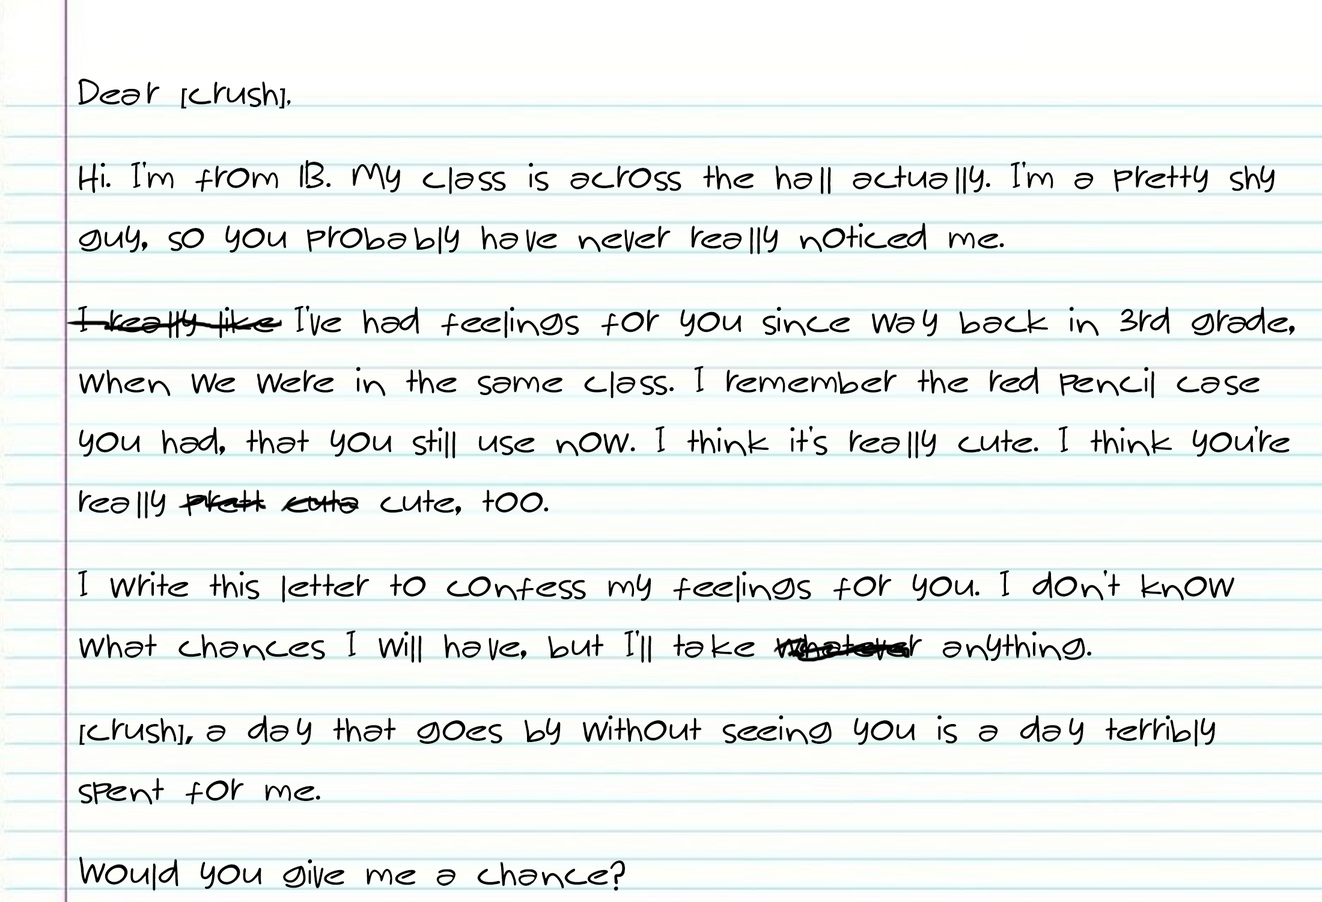
<style>
.page{position:relative;width:1322px;height:902px}
.page>*{position:absolute;margin:0}
.t1{font:22.5px/60.1px "Mak_Ngah_Punya";color:#000000}
.t2{font:22.5px/60.1px "ErasITC-Demi";color:#000000}
.t3{font:37.6px/60.1px "Mak_Ngah_Punya";color:#000000}
.t4{font:37.6px/60.1px "ErasITC-Demi";color:#000000}
</style>
<div class="page">
<p class="t1" style="left:78px;top:78px;width:1217px;height:812px">Dear <span class="t2">[</span>crush<span class="t2">]</span>,<br>Hi. I'm from 1B. My class is across the hall actually. I'm a pretty shy guy<span class="t3">,</span> so you probably have never really noticed me.<br>I really like I've had feelings for you since way back in 3rd grade<span class="t3">,</span> when we were in the same class. I remember the red pencil case you had<span class="t3">,</span> that you still use now. I think it's really cute. I think you're really prett cuta cute<span class="t3">,</span> too.<br>I write this letter to confess my feelings for you. I don't know what chances I will have<span class="t3">,</span> but I'll take whatever anything.<br><span class="t2">[</span>crush<span class="t2">]</span><span class="t4">,  </span>a day that goes by without seeing you is a day terribly spent for me.<br>Would you give me a chance?</p>
</div>
